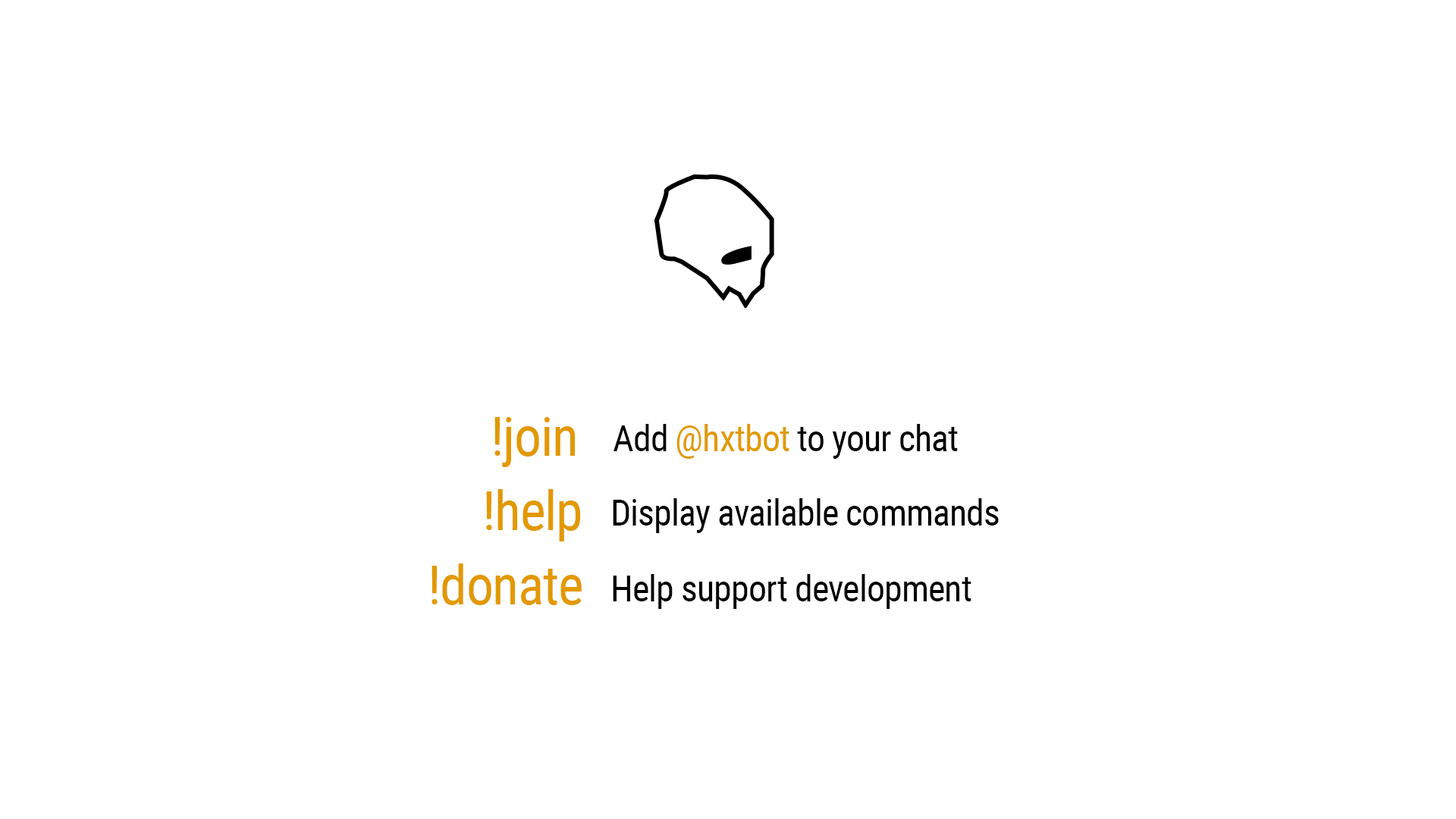
<style>
.page{position:relative;width:1456px;height:819px;background:#ffffff}
.page>*{position:absolute;margin:0}
.t1{font:54.6px "RobotoCondensed-Regular";letter-spacing:-0.02em;color:#e29900}
.t2{font:36.4px "RobotoCondensed-Regular";letter-spacing:-0.02em;color:#000000}
.t3{font:36.4px "RobotoCondensed-Regular";letter-spacing:-0.02em;color:#e29900}
</style>
<div class="page">
<p class="t1" style="left:494px;top:417px;width:82px;height:50px">!join</p>
<p class="t2" style="left:613px;top:424px;width:345px;height:35px">Add <span class="t3">@hxtbot </span>to your chat</p>
<p class="t1" style="left:486px;top:489px;width:95px;height:52px">!help</p>
<p class="t2" style="left:613px;top:498px;width:386px;height:35px">Display available commands</p>
<p class="t1" style="left:431px;top:563px;width:151px;height:42px">!donate</p>
<p class="t2" style="left:613px;top:574px;width:358px;height:35px">Help support development</p>
</div>
